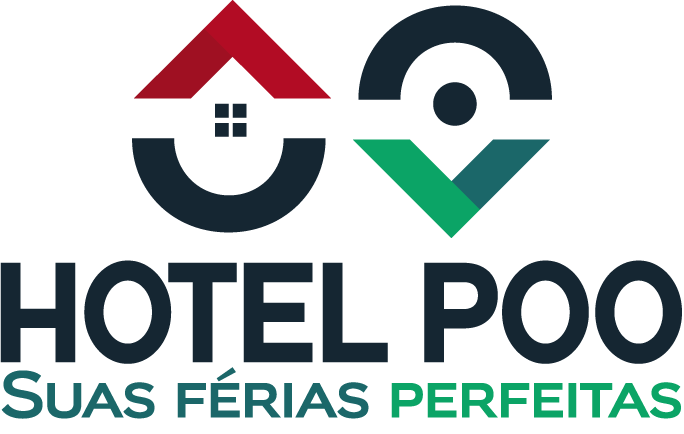
<style>
.page{position:relative;width:684px;height:434px;background:#ffffff}
.page>*{position:absolute;margin:0}
.t1{font:141.6px "REBELTON-Medium";letter-spacing:-0.03em;color:#152632;scale:0.84 1}
.t2{font:64.4px "BiondiSansRg-Regular";letter-spacing:-0.03em;color:#1b6769}
.t3{font:64.4px "BiondiSansRg-Regular";letter-spacing:-0.03em;color:#0ba466}
</style>
<div class="page">
<p class="t1" style="left:0px;top:260px;width:682px;height:104px">HOTEL poo</p>
<p class="t2" style="left:1px;top:367px;width:680px;height:52px">Suas férias <span class="t3">perfeitas</span></p>
</div>
